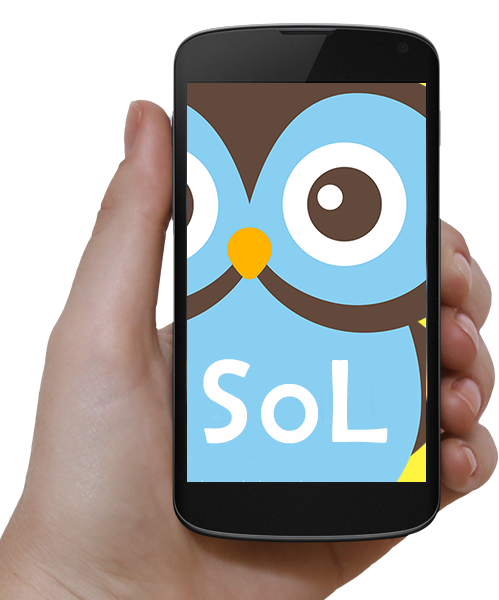
<style>
.page{position:relative;width:499px;height:600px;background:#ffffff}
.page>*{position:absolute;margin:0}
.t1{font:120px "BerlinSansFB-Reg";letter-spacing:-0.1em;color:#fefefe}
</style>
<div class="page">
<p class="t1" style="left:203px;top:359px;width:185px;height:85px">S o L</p>
</div>
